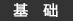
<style>
.page{position:relative;width:73px;height:21px;background:#333333}
.page>*{position:absolute;margin:0}
.t1{font:14.6px "MicrosoftYaHei";letter-spacing:1.02em;color:#ffffff;font-weight:bold}
</style>
<div class="page">
<p class="t1" style="left:13px;top:3px;width:45px;height:14px">基础</p>
</div>
